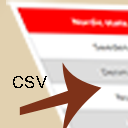
<style>
.page{position:relative;width:128px;height:128px;background:#e2d1b0}
.page>*{position:absolute;margin:0}
.t1{font:18.4px "Shruti";letter-spacing:-0.009em;color:#000000}
</style>
<div class="page">
<p class="t1" style="left:13px;top:76px;width:34px;height:12px">CSV</p>
</div>
